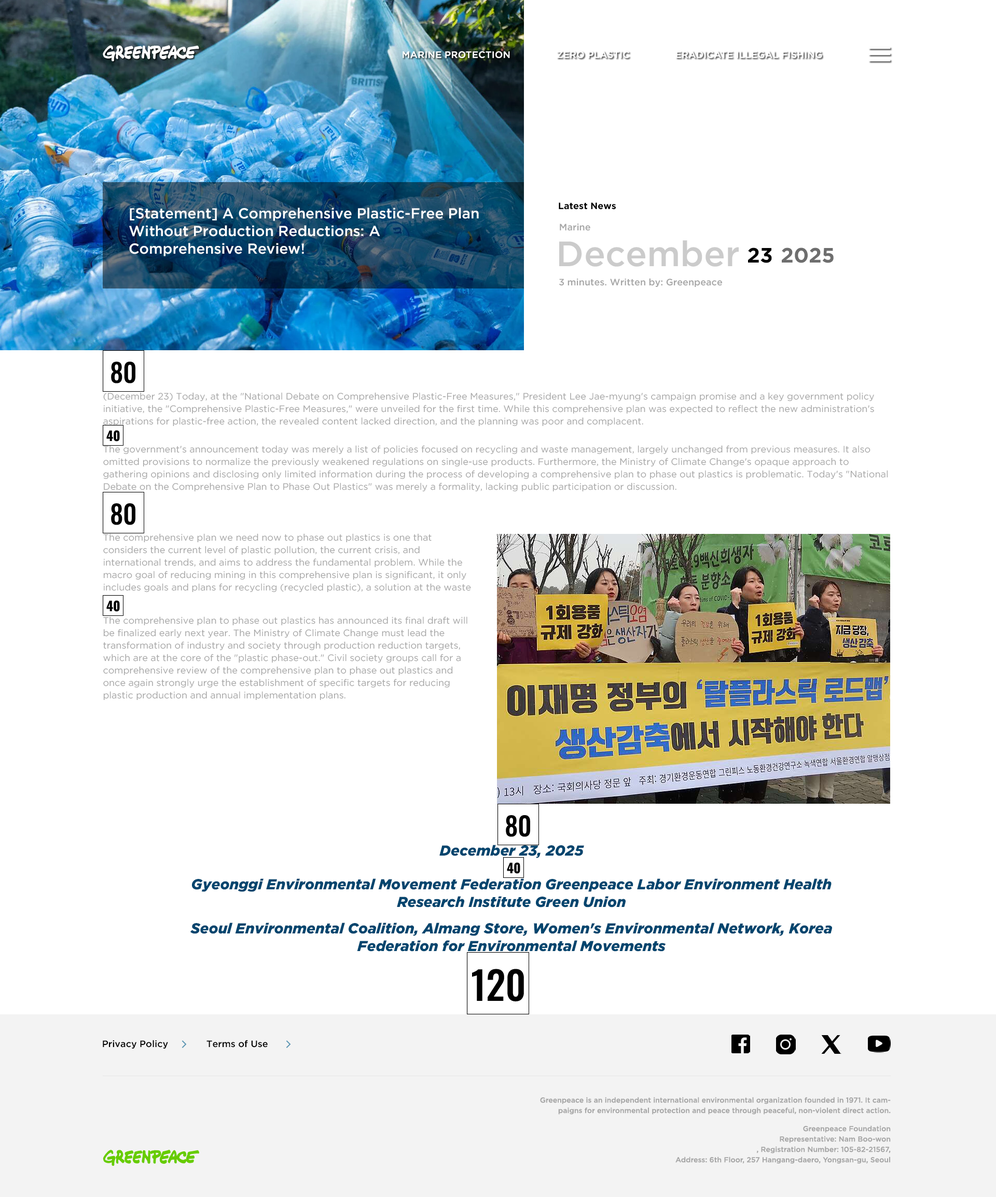
<style>
.page{position:relative;width:996px;height:1197px;background:#ffffff}
.page>*{position:absolute;margin:0}
.t1{font:9.3px "GothamPro-Medium";color:#ffffff;text-transform:uppercase}
.t2{font:14.5px/17.6px "GothamPro-Medium";color:#ffffff}
.t3{font:9.3px "GothamPro-Bold";color:#000000}
.t4{font:9.3px "GothamPro-Medium";color:#a6a6a6}
.t5{font:35.3px "GothamPro-Medium";color:#cbcbcb}
.t6{font:20.8px "GothamPro-Bold";color:#000000}
.t7{font:20.8px "GothamPro-Bold";color:#6e6e6e}
.t8{font:9.3px/12.5px "GothamPro";color:#a6a6a6}
.t9{font:14.5px "GothamPro-BlackItalic";color:#00456e}
.t10{font:14.5px/17.6px "GothamPro-BlackItalic";color:#00456e}
.t11{font:9.3px "GothamPro-Medium";color:#000000}
.t12{font:7.3px/10.4px "GothamPro-Medium";color:#a6a6a6}
</style>
<div class="page">
<p class="t1" style="left:403px;top:51px;width:107px;height:7px">Marine protection</p>
<p class="t1" style="left:557px;top:51px;width:73px;height:7px">Zero plastic</p>
<p class="t1" style="left:676px;top:51px;width:146px;height:7px">Eradicate illegal fishing</p>
<p class="t2" style="left:129px;top:208px;width:350px;height:48px">[Statement] A Comprehensive Plastic-Free Plan Without Production Reductions: A Comprehensive Review!</p>
<p class="t3" style="left:559px;top:202px;width:57px;height:8px">Latest News</p>
<p class="t4" style="left:560px;top:224px;width:30px;height:7px">Marine</p>
<p class="t5" style="left:559px;top:240px;width:180px;height:27px">December</p>
<p class="t6" style="left:748px;top:247px;width:24px;height:16px">23</p>
<p class="t7" style="left:782px;top:247px;width:52px;height:16px">2025</p>
<p class="t4" style="left:559px;top:278px;width:163px;height:9px">3 minutes. Written by: Greenpeace</p>
<p class="t8" style="left:103px;top:392px;width:771px;height:34px">(December 23) Today, at the "National Debate on Comprehensive Plastic-Free Measures," President Lee Jae-myung's campaign promise and a key government policy initiative, the "Comprehensive Plastic-Free Measures," were unveiled for the first time. While this comprehensive plan was expected to reflect the new administration's aspirations for plastic-free action, the revealed content lacked direction, and the planning was poor and complacent.</p>
<p class="t8" style="left:103px;top:445px;width:785px;height:47px">The government's announcement today was merely a list of policies focused on recycling and waste management, largely unchanged from previous measures. It also omitted provisions to normalize the previously weakened regulations on single-use products. Furthermore, the Ministry of Climate Change's opaque approach to gathering opinions and disclosing only limited information during the process of developing a comprehensive plan to phase out plastics is problematic. Today's "National Debate on the Comprehensive Plan to Phase Out Plastics" was merely a formality, lacking public participation or discussion.</p>
<p class="t8" style="left:103px;top:533px;width:368px;height:60px">The comprehensive plan we need now to phase out plastics is one that considers the current level of plastic pollution, the current crisis, and international trends, and aims to address the fundamental problem. While the macro goal of reducing mining in this comprehensive plan is significant, it only includes goals and plans for recycling (recycled plastic), a solution at the waste level, rather than goals and implementation targets at the production level. Without specific targets and annual implementation plans for reducing total plastic production at the raw material level, the plan to phase out plastics remains mere slogans.</p>
<p class="t8" style="left:103px;top:616px;width:364px;height:84px">The comprehensive plan to phase out plastics has announced its final draft will be finalized early next year. The Ministry of Climate Change must lead the transformation of industry and society through production reduction targets, which are at the core of the "plastic phase-out." Civil society groups call for a comprehensive review of the comprehensive plan to phase out plastics and once again strongly urge the establishment of specific targets for reducing plastic production and annual implementation plans.</p>
<p class="t9" style="left:439px;top:845px;width:145px;height:13px">December 23, 2025</p>
<p class="t10" style="left:192px;top:878px;width:640px;height:29px;text-align:center">Gyeonggi Environmental Movement Federation Greenpeace Labor Environment Health Research Institute Green Union</p>
<p class="t10" style="left:190px;top:923px;width:642px;height:29px;text-align:center">Seoul Environmental Coalition, Almang Store, Women's Environmental Network, Korea Federation for Environmental Movements</p>
<p class="t11" style="left:103px;top:1040px;width:65px;height:9px">Privacy Policy</p>
<p class="t11" style="left:207px;top:1040px;width:61px;height:8px">Terms of Use</p>
<p class="t12" style="left:540px;top:1097px;width:351px;height:17px;text-align:right">Greenpeace is an independent international environmental organization founded in 1971. It campaigns for environmental protection and peace through peaceful, non-violent direct action.</p>
<p class="t12" style="left:676px;top:1125px;width:215px;height:39px;text-align:right">Greenpeace Foundation<br>Representative: Nam Boo-won<br>, Registration Number: 105-82-21567,<br>Address: 6th Floor, 257 Hangang-daero, Yongsan-gu, Seoul</p>
</div>
